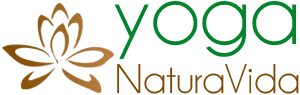
<style>
.page{position:relative;width:300px;height:95px;background:#ffffff}
.page>*{position:absolute;margin:0}
.t1{font:42px/49.3px "Champagne&Limousines";color:#7f4a05}
.t2{font:93px/49.3px "Champagne&Limousines";color:#03842d}
</style>
<div class="page">
<p class="t1" style="left:114px;top:1px;width:185px;height:93px;text-align:center"><span class="t2">yoga<br></span>NaturaVida</p>
</div>
